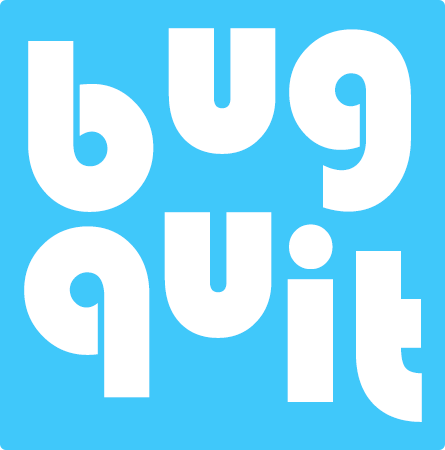
<style>
.page{position:relative;width:445px;height:450px;background:#40c8fa}
.page>*{position:absolute;margin:0}
.t1{font:251.9px "STHupo";color:#ffffff}
</style>
<div class="page">
<p class="t1" style="left:168px;top:28px;width:108px;height:126px">u</p>
<p class="t1" style="left:289px;top:29px;width:122px;height:183px">g</p>
<p class="t1" style="left:28px;top:41px;width:126px;height:171px">b</p>
<p class="t1" style="left:164px;top:212px;width:108px;height:126px">u</p>
<p class="t1" style="left:24px;top:226px;width:126px;height:172px">q</p>
<p class="t1" style="left:287px;top:224px;width:46px;height:178px">i</p>
<p class="t1" style="left:356px;top:251px;width:66px;height:171px">t</p>
</div>
